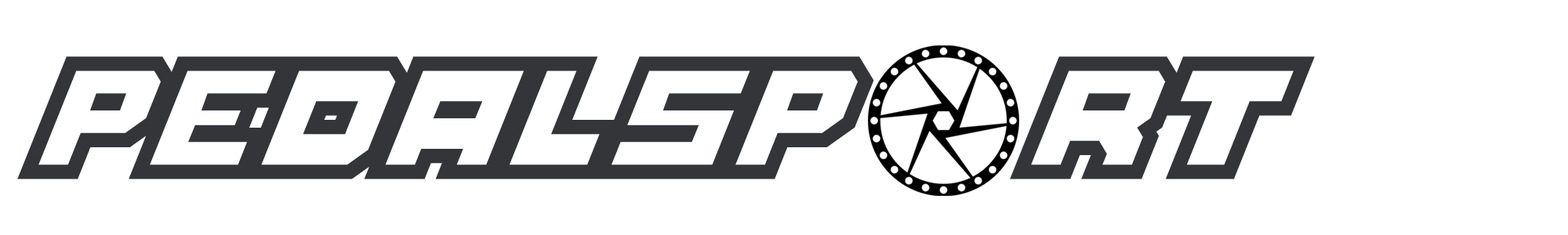
<style>
.page{position:relative;width:1568px;height:235px;background:#ffffff}
.page>*{position:absolute;margin:0}
.t1{font:126.8px "FullPack2025";color:#333539}
</style>
<div class="page">
<p class="t1" style="left:17px;top:56px;width:857px;height:124px">Pedalsp</p>
<p class="t1" style="left:1010px;top:56px;width:305px;height:124px">rt</p>
</div>
